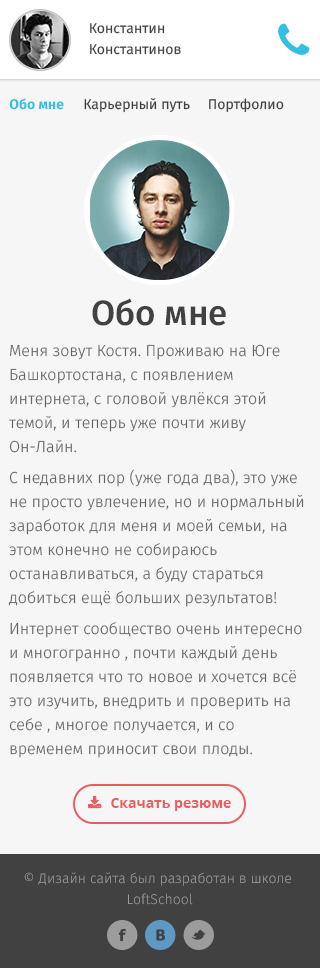
<style>
.page{position:relative;width:320px;height:968px;background:#f6f6f6}
.page>*{position:absolute;margin:0}
.t1{font:14px/21px "FiraSans-Regular";color:#414141}
.t2{font:14px "FiraSans-Bold";color:#33c1e3}
.t3{font:14px "FiraSans-Regular";color:#414141}
.t4{font:35px "FiraSans-Medium";color:#414141}
.t5{font:16px/24px "FiraSans-Light";color:#646464}
.t6{font:14px "OpenSans-Bold";color:#e85f61}
.t7{font:14px/21px "FiraSans-Light";color:#9c9c9c}
</style>
<div class="page">
<p class="t1" style="left:90px;top:23px;width:91px;height:32px">Константин<br>Константинов</p>
<p class="t2" style="left:9px;top:98px;width:55px;height:12px">Обо мне</p>
<p class="t3" style="left:84px;top:98px;width:106px;height:15px">Карьерный путь</p>
<p class="t3" style="left:209px;top:98px;width:75px;height:15px">Портфолио</p>
<p class="t4" style="left:92px;top:298px;width:134px;height:28px">Обо мне</p>
<p class="t5" style="left:8px;top:344px;width:296px;height:414px">Меня зовут Костя. Проживаю на Юге Башкортостана, с появлением интернета, с головой увлёкся этой темой, и теперь уже почти живу Он-Лайн.<br>С недавних пор (уже года два), это уже не просто увлечение, но и нормальный заработок для меня и моей семьи, на этом конечно не собираюсь останавливаться, а буду стараться добиться ещё больших результатов!<br>Интернет сообщество очень интересно и многогранно , почти каждый день появляется что то новое и хочется всё это изучить, внедрить и проверить на себе , многое получается, и со временем приносит свои плоды.</p>
<p class="t6" style="left:111px;top:798px;width:120px;height:13px">Скачать резюме</p>
<p class="t7" style="left:24px;top:872px;width:267px;height:33px;text-align:center">© Дизайн сайта был разработан в школе <br>LoftSchool</p>
</div>
